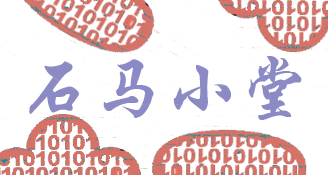
<style>
.page{position:relative;width:328px;height:175px;background:#ffffff}
.page>*{position:absolute;margin:0}
.t1{font:72px "STXingkai";color:#8b8ac5}
</style>
<div class="page">
<p class="t1" style="left:29px;top:56px;width:273px;height:64px">石马小堂</p>
</div>
